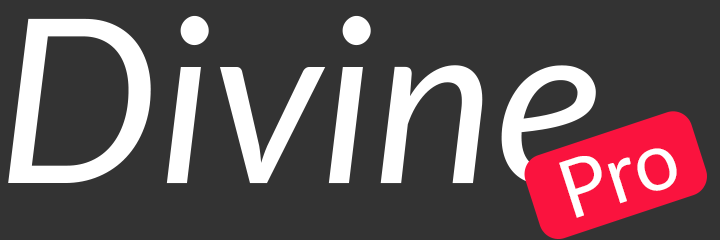
<style>
.page{position:relative;width:720px;height:240px;background:#333333}
.page>*{position:absolute;margin:0}
.t1{font:228.5px "Lato-Italic";color:#ffffff}
.t2{font:80.3px "Lato-Regular";color:#ffffff}
</style>
<div class="page">
<p class="t1" style="left:8px;top:15px;width:588px;height:170px">Divine</p>
<p class="t2" style="left:559px;top:148px;width:118px;height:70px;rotate:-18deg">Pro</p>
</div>
